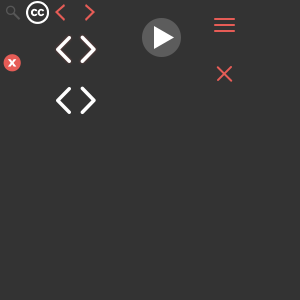
<style>
.page{position:relative;width:300px;height:300px;background:#333333}
.page>*{position:absolute;margin:0}
.t1{font:13px "Verdana-Bold";color:#ffffff}
</style>
<div class="page">
<p class="t1" style="left:8px;top:59px;width:9px;height:8px">x</p>
</div>
